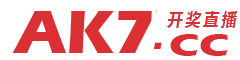
<style>
.page{position:relative;width:240px;height:60px;background:#ffffff}
.page>*{position:absolute;margin:0}
.t1{font:63px "ErasITC-Bold";color:#da2f33;text-transform:uppercase}
.t2{font:32.7px "ErasITC-Bold";color:#da2f33;text-transform:uppercase;scale:1.37 1}
</style>
<div class="page">
<p class="t1" style="left:12px;top:11px;width:140px;height:42px">AK7</p>
<p class="t2" style="left:170px;top:34px;width:58px;height:22px">CC</p>
</div>
